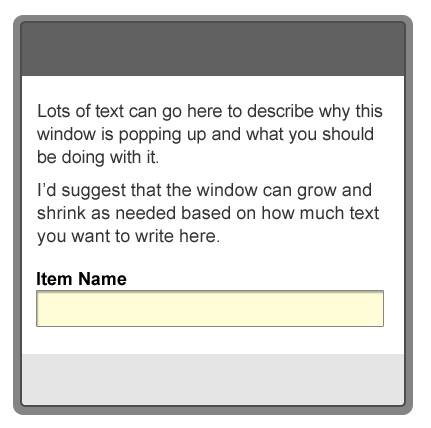
<style>
.page{position:relative;width:431px;height:428px;background:#ffffff}
.page>*{position:absolute;margin:0}
.t1{font:18px/23.1px "ArialMT";color:#333333}
.t2{font:18px "Arial-BoldMT";color:#000000}
</style>
<div class="page">
<p class="t1" style="left:37px;top:103px;width:346px;height:143px">Lots of text can go here to describe why this window is popping up and what you should be doing with it.<br>I’d suggest that the window can grow and shrink as needed based on how much text you want to write here.</p>
<p class="t2" style="left:37px;top:272px;width:90px;height:14px">Item Name</p>
</div>
